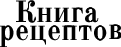
<style>
.page{position:relative;width:121px;height:47px;background:#ffffff}
.page>*{position:absolute;margin:0}
.t1{font:30.1px/17.7px "OldStandardTT-Bold";color:#010101}
</style>
<div class="page">
<p class="t1" style="left:0px;top:0px;width:122px;height:47px;text-align:center">Книга <br>рецептов</p>
</div>
